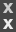
<style>
.page{position:relative;width:16px;height:32px;background:#464646}
.page>*{position:absolute;margin:0}
.t1{font:19.2px "Arial-BoldMT";color:#cccccc}
.t2{font:19.2px "Arial-BoldMT";color:#eeeeee}
</style>
<div class="page">
<p class="t1" style="left:3px;top:3px;width:11px;height:10px">x</p>
<p class="t2" style="left:3px;top:19px;width:11px;height:10px">x</p>
</div>
